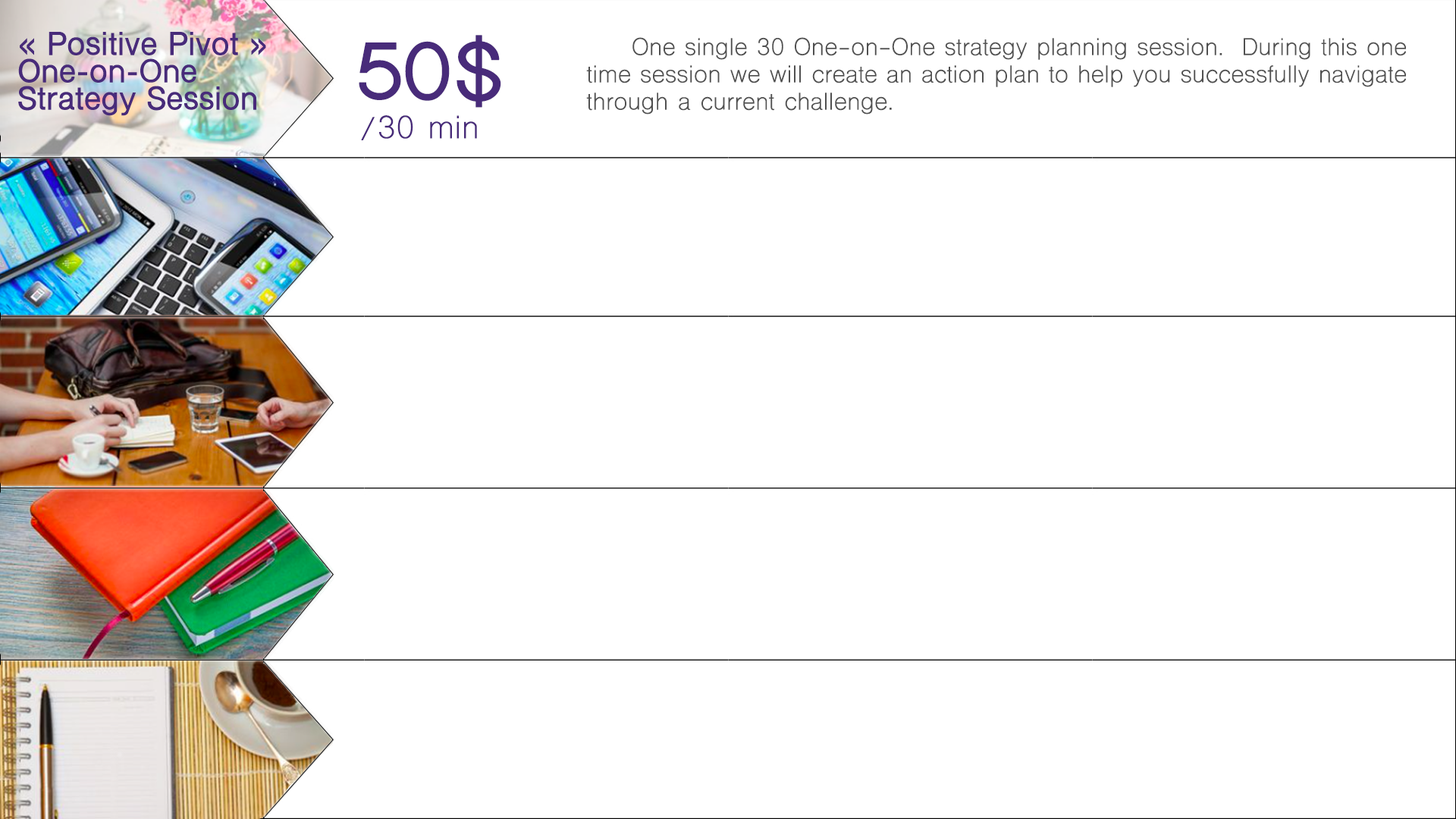
<style>
.page{position:relative;width:1456px;height:819px;background:#ffffff}
.page>*{position:absolute;margin:0}
.t1{font:30.3px/27.3px "ShreeDev0714-Bold";color:#482b7a;font-weight:bold}
.t2{font:75.7px "ShreeDev0714-Bold";color:#482b7a;font-weight:bold}
.t3{font:22.7px/27.3px "ShreeDev0714";color:#505050;font-weight:bold}
.t4{font:22.7px/27.3px "ShreeDev0714";color:#686969;font-weight:bold}
.t5{font:30.3px "ShreeDev0714";color:#482b7a;font-weight:bold}
</style>
<div class="page">
<p class="t1" style="left:18px;top:32px;width:248px;height:84px;text-align:justify">« Positive Pivot »<br>One-on-One <br>Strategy Session</p>
<p class="t2" style="left:359px;top:35px;width:142px;height:73px">50$</p>
<p class="t3" style="left:586px;top:37px;width:820px;height:78px;text-align:justify"><span class="t4">     </span>One single 30 One-on-One strategy planning session.  During this one time session we will create an action plan to help you successfully navigate through a current challenge.<br><span class="t4"><br>(Phone or Video Conference)<br><br>(In Person) Currently Unavailable</span></p>
<p class="t5" style="left:361px;top:115px;width:116px;height:25px">/30 min</p>
</div>
